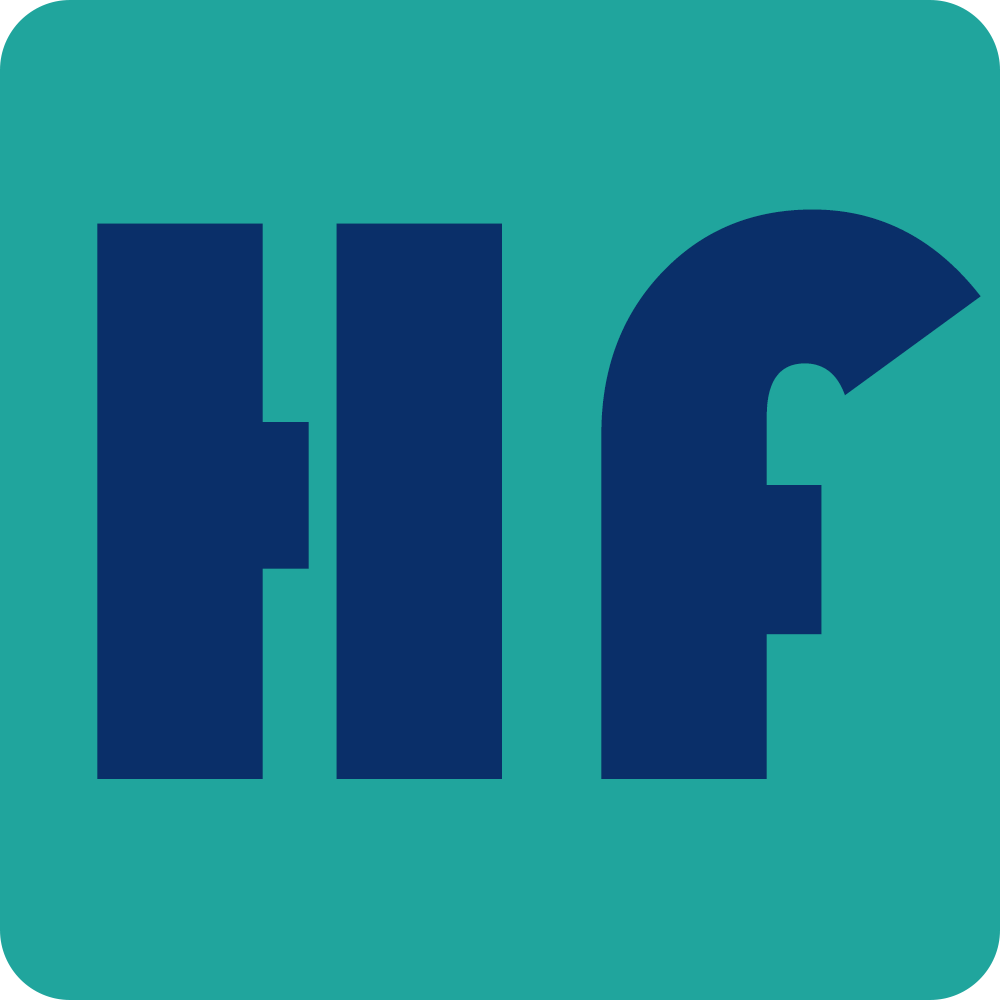
<style>
.page{position:relative;width:1000px;height:1000px;background:#20a59d}
.page>*{position:absolute;margin:0}
.t1{font:833.3px "Bauhaus93";color:#0a2f69}
</style>
<div class="page">
<p class="t1" style="left:97px;top:209px;width:884px;height:570px">HF</p>
</div>
